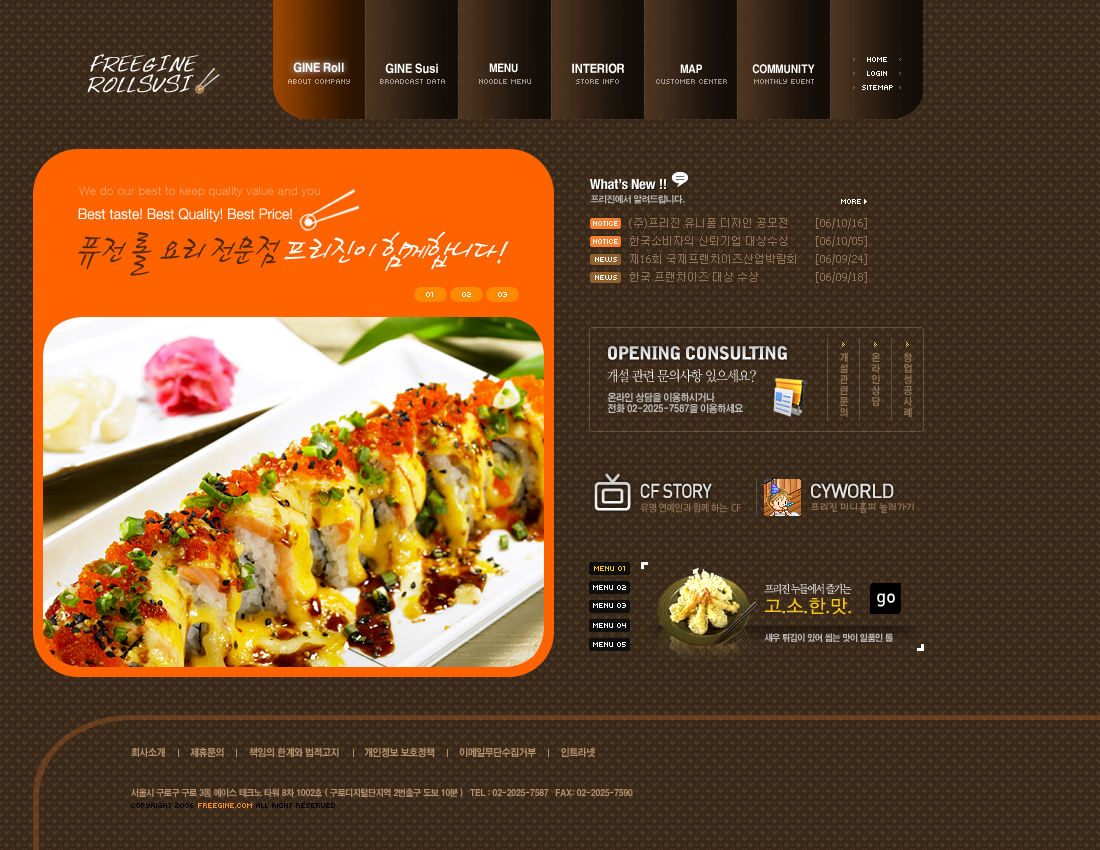
<style>
.page{position:relative;width:1100px;height:850px;background:#37281a}
.page>*{position:absolute;margin:0}
.t1{font:21.5px "FentonsHand-Plain";letter-spacing:-0.05em;color:#ffffff;font-weight:bold}
.t2{font:12px "H2gtrE";letter-spacing:-0.05em;color:#ffffff;scale:0.9 1}
.t3{font:11px "H2gtrE";letter-spacing:-0.05em;color:#ffffff;scale:0.9 1}
.t4{font:8px/14px "Kroeger0555";color:#ffffff;text-transform:uppercase}
.t5{font:22.5px "FentonsHand-Plain";letter-spacing:-0.05em;color:#ffffff;font-weight:bold}
.t6{font:8px "Kroeger0555";color:#b19b8a}
.t7{font:8px "Kroeger0555";color:#9e9892}
.t8{font:8px "Kroeger0555";color:#9e9792}
.t9{font:14px "HelveticaNeueLT-BoldCond";color:#ffffff}
.t10{font:12px "Gulim";letter-spacing:-0.025em;color:#ffa76e}
.t11{font:9px "HYgtrE";letter-spacing:-0.05em;color:#c9c9c9;scale:0.95 1}
.t12{font:14.5px "HelveticaNeueCE-Light";letter-spacing:0.01em;color:#ffffff;scale:0.95 1}
.t13{font:8px "Kroeger0555";color:#ffffff}
.t14{font:11px/18px "Dotum";color:#907154}
.t15{font:11px/18px "Tahoma";color:#907154}
.t16{font:44px "CreCjaM";letter-spacing:-0.1em;color:#502908;scale:0.95 1}
.t17{font:44px "CreCjaM";letter-spacing:-0.1em;color:#ffffff;scale:0.95 1}
.t18{font:18px "BellGothicBT-Black";letter-spacing:-0.05em;color:#e3e3e3}
.t19{font:10px/11px "H2gtrE";letter-spacing:-0.05em;color:#907154;scale:0.9 1}
.t20{font:14px "YDIWebBatan";letter-spacing:-0.05em;color:#ffffff;scale:0.9 1}
.t21{font:10px/11px "HYgtrE";letter-spacing:-0.05em;color:#bcbcbc;scale:0.9 1}
.t22{font:20px "DIN-Medium";letter-spacing:-0.05em;color:#e2e2e2;scale:0.9 1}
.t23{font:20px "DIN-Medium";letter-spacing:-0.05em;color:#e2e2e2}
.t24{font:10px "RixGoB";letter-spacing:-0.05em;color:#907154;scale:0.95 1}
.t25{font:12px "RixFreshmanM";letter-spacing:-0.05em;color:#907154;scale:0.95 1}
.t26{font:8px "Kroeger0555";color:#f8c417}
.t27{font:11px "YDIWebBatan";letter-spacing:-0.1em;color:#dedede;scale:0.9 1}
.t28{font:18px/19.6px "YDIWebDotum";letter-spacing:0.025em;color:#f8c417}
.t29{font:18px "Dinmed";color:#ffffff}
.t30{font:9px "HYgtrE";letter-spacing:-0.05em;color:#bcbcbc;scale:0.9 1}
.t31{font:10px "H2gtrE";letter-spacing:-0.05em;color:#b5916f;scale:0.9 1}
.t32{font:9px "H2gtrE";letter-spacing:-0.05em;color:#b5916f;scale:0.9 1}
.t33{font:8px "Kroeger0555";color:#000000}
.t34{font:8px "Kroeger0555";color:#fd8f32}
</style>
<div class="page">
<p class="t1" style="left:90px;top:54px;width:109px;height:18px">FREEGINE</p>
<p class="t2" style="left:293px;top:62px;width:51px;height:11px">GINE Roll</p>
<p class="t2" style="left:385px;top:63px;width:53px;height:11px">GINE Susi</p>
<p class="t3" style="left:489px;top:63px;width:29px;height:10px">MENU</p>
<p class="t2" style="left:572px;top:63px;width:52px;height:11px">INTERIOR</p>
<p class="t3" style="left:680px;top:64px;width:22px;height:9px">MAP</p>
<p class="t3" style="left:752px;top:64px;width:63px;height:10px">COMMUNITY</p>
<p class="t4" style="left:862px;top:57px;width:31px;height:33px;text-align:center">HOME<br>LOGIN<br>SITEMAP</p>
<p class="t5" style="left:87px;top:74px;width:107px;height:19px">ROLLSUSI</p>
<p class="t6" style="left:288px;top:79px;width:62px;height:5px">ABOUT COMPANY</p>
<p class="t7" style="left:380px;top:79px;width:65px;height:5px">broadcast DATA</p>
<p class="t8" style="left:479px;top:79px;width:52px;height:5px">NOODLE MENU</p>
<p class="t7" style="left:576px;top:79px;width:43px;height:5px">STORE INFO</p>
<p class="t8" style="left:656px;top:79px;width:71px;height:5px">CUSTOMER CENTER</p>
<p class="t8" style="left:754px;top:79px;width:60px;height:5px">MONTHLY EVENT</p>
<p class="t9" style="left:590px;top:179px;width:76px;height:11px">What’s New !!</p>
<p class="t10" style="left:79px;top:186px;width:241px;height:11px">We do our best to keep quality value and you</p>
<p class="t11" style="left:590px;top:195px;width:95px;height:9px;opacity:0.89">프리진에서 알려드립니다.</p>
<p class="t12" style="left:78px;top:208px;width:214px;height:14px">Best taste! Best Quality! Best Price!</p>
<p class="t13" style="left:841px;top:199px;width:20px;height:5px">MORE</p>
<p class="t13" style="left:593px;top:221px;width:25px;height:5px">NOTICE</p>
<p class="t14" style="left:629px;top:218px;width:167px;height:64px"><span class="t15">(</span>주<span class="t15">)</span>프리진 유니폼 디자인 공모전 <br>한국소비자의 신뢰기업 대상수상<br>제<span class="t15">16</span>회 국제프랜차이즈산업박람회<br>한국 프랜차이즈 대상 수상</p>
<p class="t15" style="left:816px;top:218px;width:51px;height:65px">[06/10/16]<br>[06/10/05]<br>[06/09/24]<br>[06/09/18]</p>
<p class="t16" style="left:78px;top:231px;width:431px;height:45px">퓨전 롤 요리 전문점 <span class="t17">프리진이 함께합니다!</span></p>
<p class="t13" style="left:593px;top:239px;width:25px;height:5px">NOTICE</p>
<p class="t13" style="left:595px;top:257px;width:22px;height:5px">NEWS</p>
<p class="t13" style="left:595px;top:257px;width:22px;height:5px">NEWS</p>
<p class="t13" style="left:595px;top:275px;width:22px;height:5px">NEWS</p>
<p class="t13" style="left:426px;top:292px;width:7px;height:5px">01</p>
<p class="t13" style="left:462px;top:292px;width:9px;height:5px">02</p>
<p class="t13" style="left:498px;top:292px;width:9px;height:5px">03</p>
<p class="t18" style="left:608px;top:346px;width:179px;height:14px">OPENING CONSULTING</p>
<p class="t19" style="left:839px;top:352px;width:10px;height:65px">개<br>설<br>관<br>련<br>문<br>의</p>
<p class="t19" style="left:871px;top:352px;width:10px;height:54px">온<br>라<br>인<br>상<br>담</p>
<p class="t19" style="left:903px;top:352px;width:9px;height:65px">창<br>업<br>성<br>공<br>사<br>례</p>
<p class="t20" style="left:607px;top:369px;width:149px;height:14px">개설 관련 문의사항 있으세요?</p>
<p class="t21" style="left:607px;top:392px;width:136px;height:22px">온라인 상담을 이용하시거나<br>전화 02-2025-7587을 이용하세요</p>
<p class="t22" style="left:640px;top:483px;width:72px;height:15px">CF STORY</p>
<p class="t23" style="left:811px;top:483px;width:83px;height:15px">CYWORLD</p>
<p class="t24" style="left:640px;top:503px;width:101px;height:10px">유명 연예인과 함께 하는  CF</p>
<p class="t25" style="left:811px;top:501px;width:103px;height:13px">프리진 미니홈피 놀러가기</p>
<p class="t26" style="left:594px;top:566px;width:31px;height:5px">MENU 01</p>
<p class="t13" style="left:593px;top:585px;width:33px;height:5px">MENU 02</p>
<p class="t27" style="left:764px;top:583px;width:88px;height:32px">프리진 누들에서 즐기는 <br><span class="t28">고.소.한.맛.</span></p>
<p class="t29" style="left:877px;top:593px;width:18px;height:14px">go</p>
<p class="t13" style="left:593px;top:603px;width:33px;height:5px">MENU 03</p>
<p class="t13" style="left:593px;top:623px;width:33px;height:5px">MENU 04</p>
<p class="t30" style="left:764px;top:633px;width:129px;height:9px">새우 튀김이 있어 씹는 맛이 일품인 롤</p>
<p class="t13" style="left:593px;top:642px;width:33px;height:5px">MENU 05</p>
<p class="t31" style="left:131px;top:747px;width:464px;height:11px">회사소개          제휴문의          책임의 한계와 법적고지          개인정보 보호정책          이메일무단수집거부          인트라넷</p>
<p class="t32" style="left:131px;top:788px;width:502px;height:9px">서울시 구로구 구로 3동 에이스 테크노 타워 8차 1002호 ( 구로디지털단지역 2번출구 도보 10분 )   TEL : 02-2025-7587   FAX: 02-2025-7590</p>
<p class="t33" style="left:131px;top:803px;width:204px;height:5px">Copyright 2006 <span class="t34">FREEGINE.COM </span>All Right Reserved</p>
</div>
